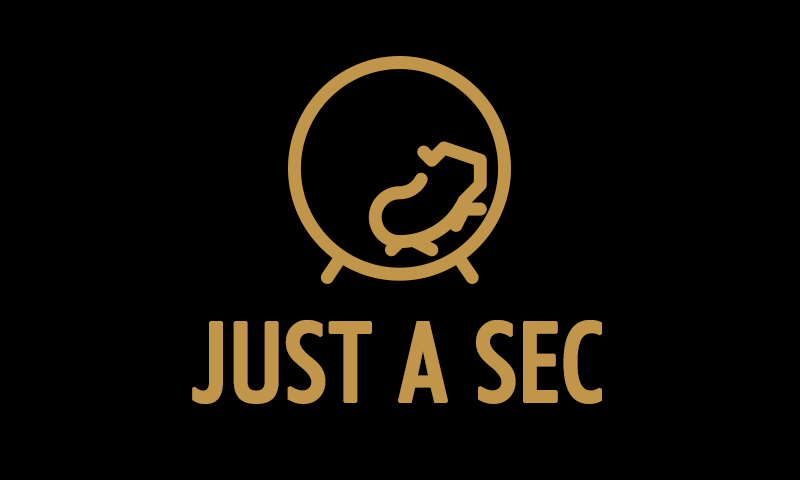
<style>
.page{position:relative;width:800px;height:480px;background:#000000}
.page>*{position:absolute;margin:0}
.t1{font:110.5px "FuturaBT-MediumCondensed";color:#c1964a;font-weight:bold}
</style>
<div class="page">
<p class="t1" style="left:192px;top:320px;width:410px;height:84px">JUST A SEC</p>
</div>
